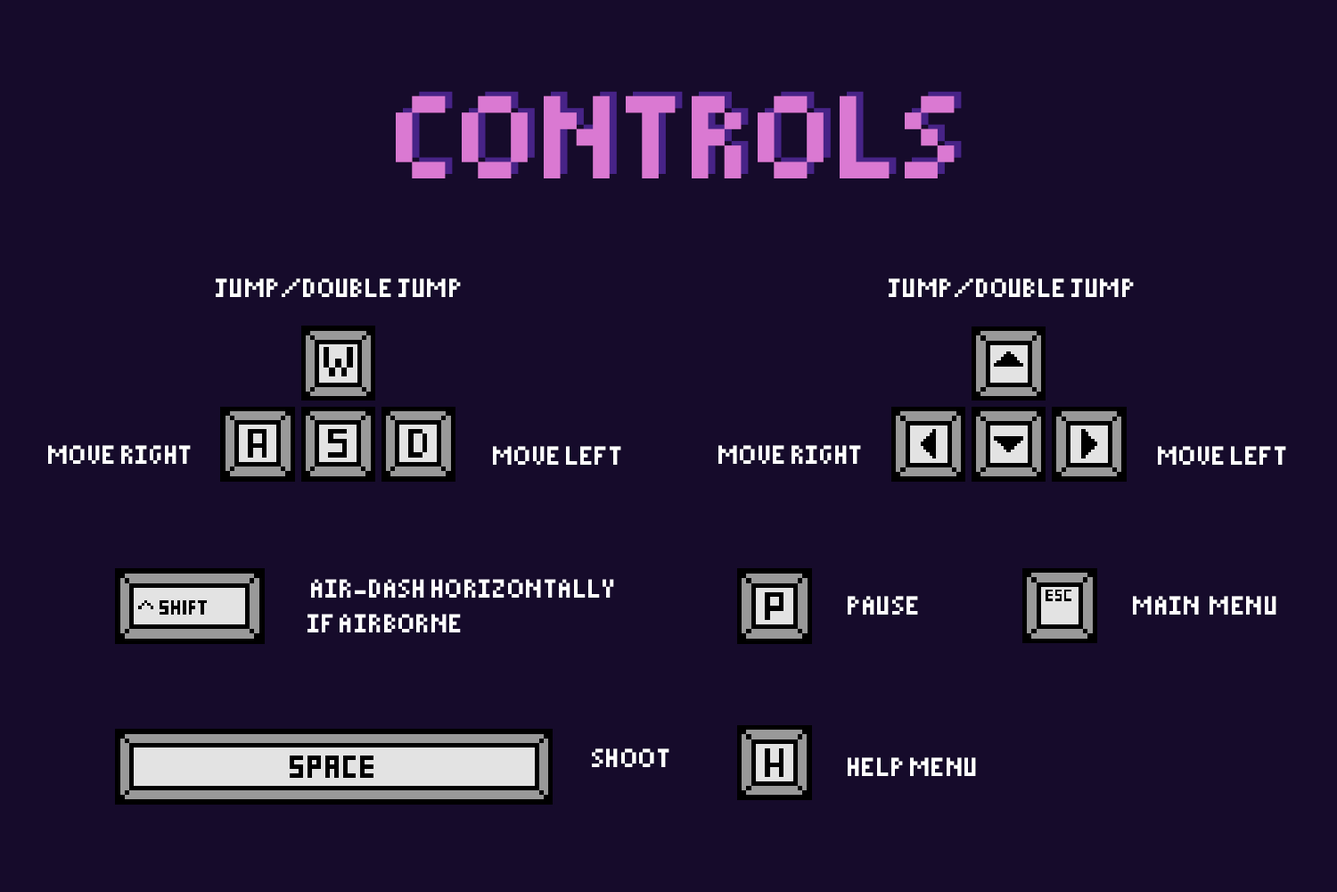
<style>
.page{position:relative;width:1337px;height:892px;background:#160b2b}
.page>*{position:absolute;margin:0}
.t1{font:131.5px "Pixelated";color:#da79d2}
.t2{font:131.5px "Pixelated"}
.t3{font:29.2px "Pixelated";color:#ffffff}
</style>
<div class="page">
<p class="t1" style="left:396px;top:95px;width:559px;height:83px">CONTROLS</p>
<p class="t2" style="left:403px;top:91px;width:559px;height:83px">CONTROLS</p>
<p class="t3" style="left:216px;top:278px;width:245px;height:19px">JUMP/DOUBLE JUMP</p>
<p class="t3" style="left:889px;top:278px;width:245px;height:19px">JUMP/DOUBLE JUMP</p>
<p class="t3" style="left:48px;top:445px;width:143px;height:19px">MOVE RIGHT</p>
<p class="t3" style="left:493px;top:446px;width:128px;height:19px">MOVE LEFT</p>
<p class="t3" style="left:719px;top:445px;width:142px;height:19px">MOVE RIGHT</p>
<p class="t3" style="left:1158px;top:446px;width:129px;height:19px">MOVE LEFT</p>
<p class="t3" style="left:848px;top:596px;width:70px;height:18px">PAUSE</p>
<p class="t3" style="left:1133px;top:596px;width:144px;height:18px">MAIN  MENU</p>
<p class="t3" style="left:592px;top:748px;width:78px;height:19px">SHOOT</p>
<p class="t3" style="left:848px;top:757px;width:128px;height:19px">HELP MENU</p>
</div>
